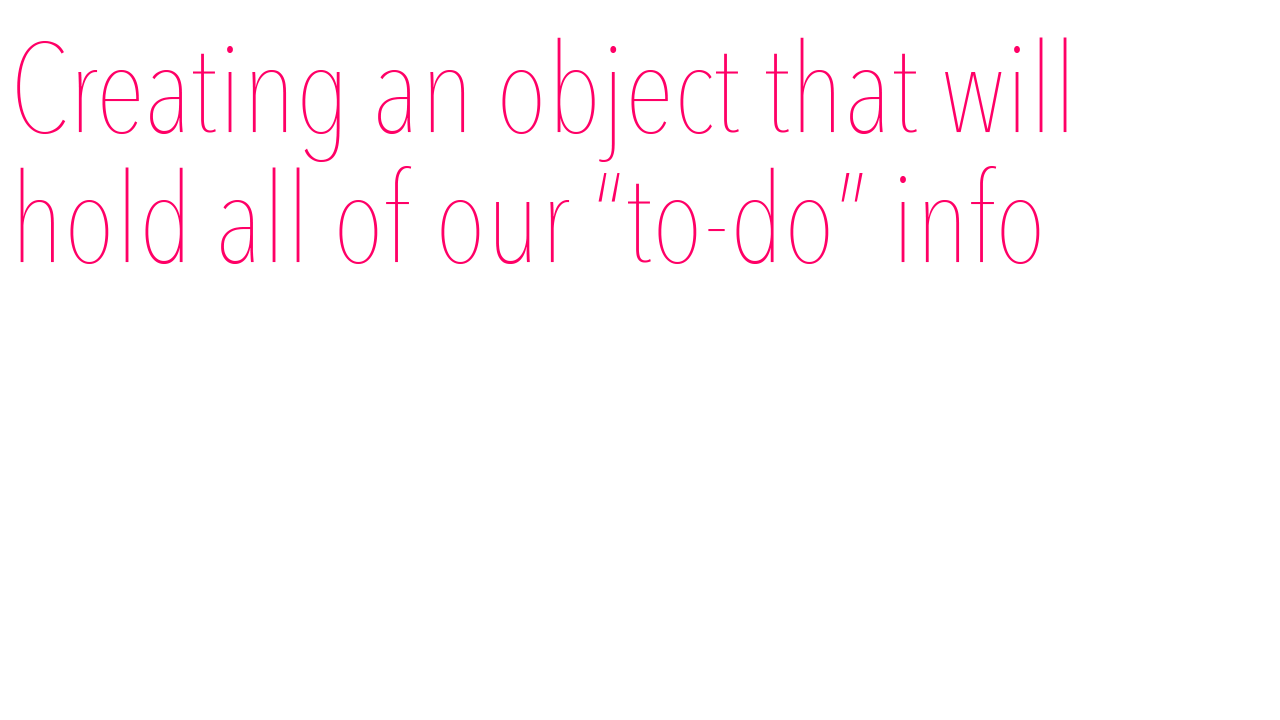
<style>
.page{position:relative;width:1280px;height:720px;background:#ffffff}
.page>*{position:absolute;margin:0}
.t1{font:125px "AvenirNextCondensed-UltraLight";color:#ff0066}
</style>
<div class="page">
<p class="t1" style="left:17px;top:37px;width:1050px;height:227px">Creating an object that will<br>hold all of our “to-do” info</p>
</div>
